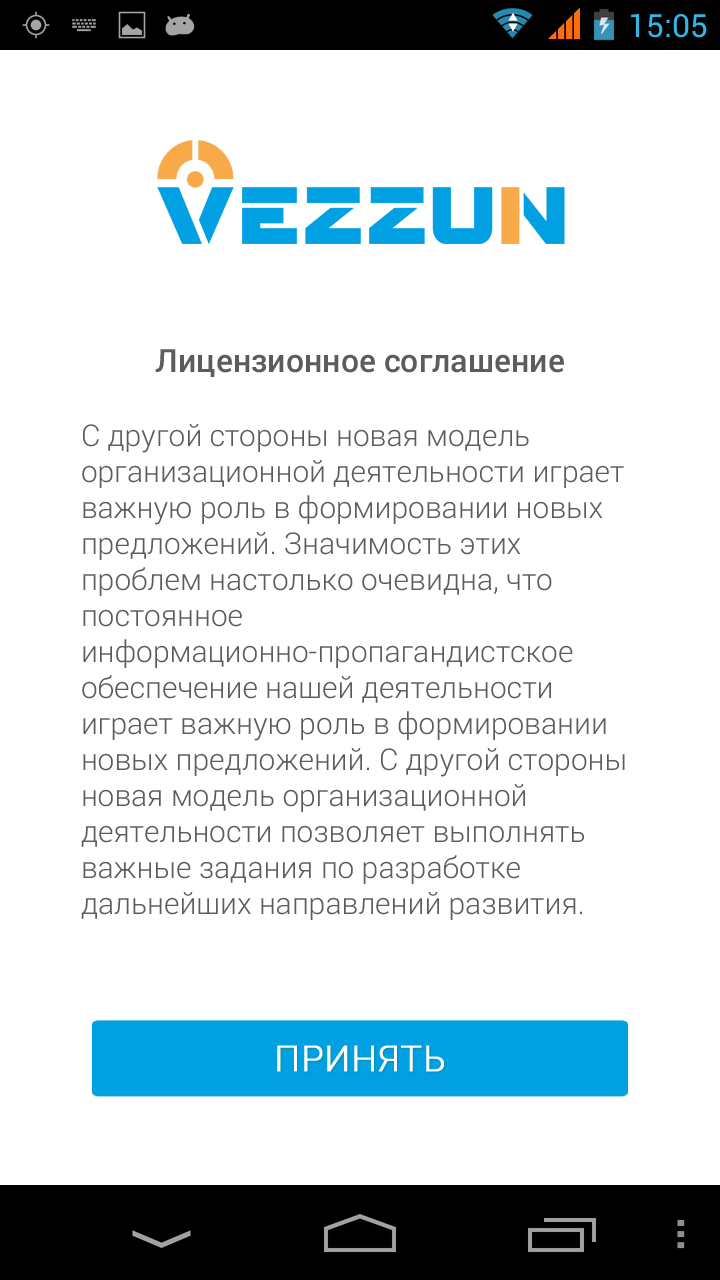
<style>
.page{position:relative;width:720px;height:1280px;background:#ffffff}
.page>*{position:absolute;margin:0}
.t1{font:30px "Roboto-Light";color:#5c5c5c}
.t2{font:32px "Roboto-Medium";color:#5c5c5c}
.t3{font:36px "Roboto-Light";color:#ffffff;text-transform:uppercase;font-weight:bold}
</style>
<div class="page">
<p class="t1" style="left:81px;top:349px;width:544px;height:571px;text-align:center"><span class="t2">Лицензионное соглашение<br><br></span>С другой стороны новая модель организационной деятельности играет важную роль в формировании новых предложений. Значимость этих проблем настолько очевидна, что постоянное информационно-пропагандистское обеспечение нашей деятельности играет важную роль в формировании новых предложений. С другой стороны новая модель организационной деятельности позволяет выполнять важные задания по разработке дальнейших направлений развития.</p>
<p class="t3" style="left:277px;top:1045px;width:167px;height:27px">ПРИНЯТЬ</p>
</div>
